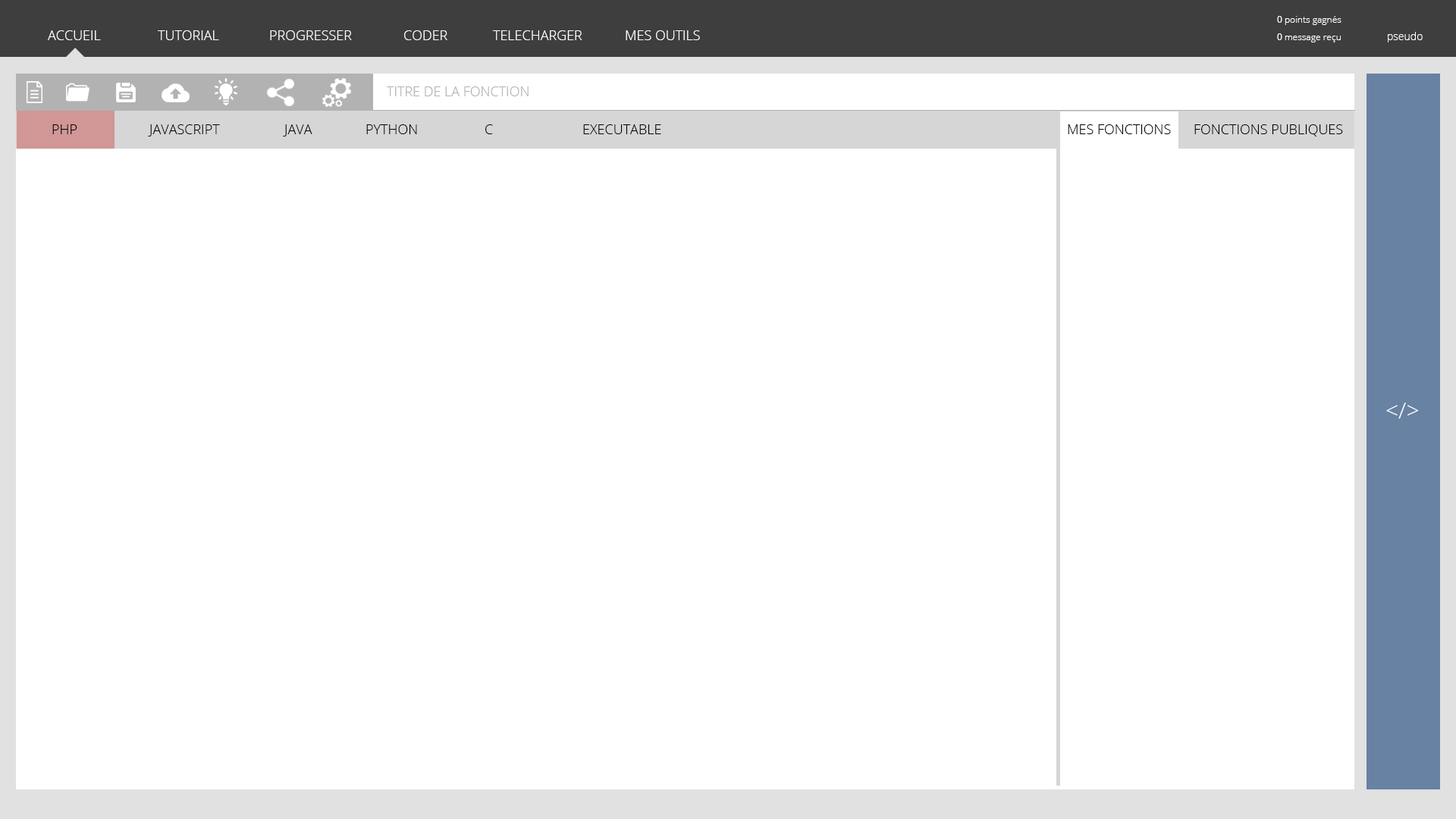
<style>
.page{position:relative;width:1456px;height:819px;background:#ffffff}
.page>*{position:absolute;margin:0}
.t1{font:9.1px "OpenSans-Light";color:#ffffff}
.t2{font:9.1px "OpenSans";color:#ffffff}
.t3{font:13.6px "OpenSans-Light";color:#ffffff}
.t4{font:10.6px "OpenSans-Light";color:#ffffff}
.t5{font:13.6px "OpenSans-Light";color:#b2b2b2}
.t6{font:13.6px "OpenSans-Light";color:#000000}
.t7{font:22.7px "OpenSans-Light";color:#ffffff}
</style>
<div class="page">
<p class="t1" style="left:1277px;top:16px;width:64px;height:9px"><span class="t2">0</span> points gagnés</p>
<p class="t3" style="left:48px;top:30px;width:53px;height:10px">ACCUEIL</p>
<p class="t3" style="left:158px;top:30px;width:61px;height:10px">TUTORIAL</p>
<p class="t3" style="left:270px;top:30px;width:82px;height:10px">PROGRESSER</p>
<p class="t3" style="left:404px;top:30px;width:43px;height:10px">CODER</p>
<p class="t3" style="left:493px;top:30px;width:89px;height:10px">TELECHARGER</p>
<p class="t3" style="left:626px;top:30px;width:74px;height:10px">MES OUTILS</p>
<p class="t1" style="left:1277px;top:33px;width:64px;height:9px"><span class="t2">0</span> message reçu</p>
<p class="t4" style="left:1388px;top:32px;width:35px;height:10px">pseudo</p>
<p class="t5" style="left:387px;top:86px;width:142px;height:10px">TITRE DE LA FONCTION</p>
<p class="t6" style="left:52px;top:124px;width:25px;height:10px">PHP</p>
<p class="t6" style="left:148px;top:124px;width:72px;height:12px">JAVASCRIPT</p>
<p class="t6" style="left:283px;top:124px;width:29px;height:12px">JAVA</p>
<p class="t6" style="left:366px;top:124px;width:51px;height:10px">PYTHON</p>
<p class="t6" style="left:485px;top:124px;width:8px;height:10px">C</p>
<p class="t6" style="left:583px;top:124px;width:78px;height:10px">EXECUTABLE</p>
<p class="t6" style="left:1068px;top:124px;width:103px;height:10px">MES FONCTIONS</p>
<p class="t6" style="left:1194px;top:124px;width:149px;height:12px">FONCTIONS PUBLIQUES</p>
<p class="t7" style="left:1386px;top:403px;width:33px;height:16px">&lt;/&gt;</p>
</div>
